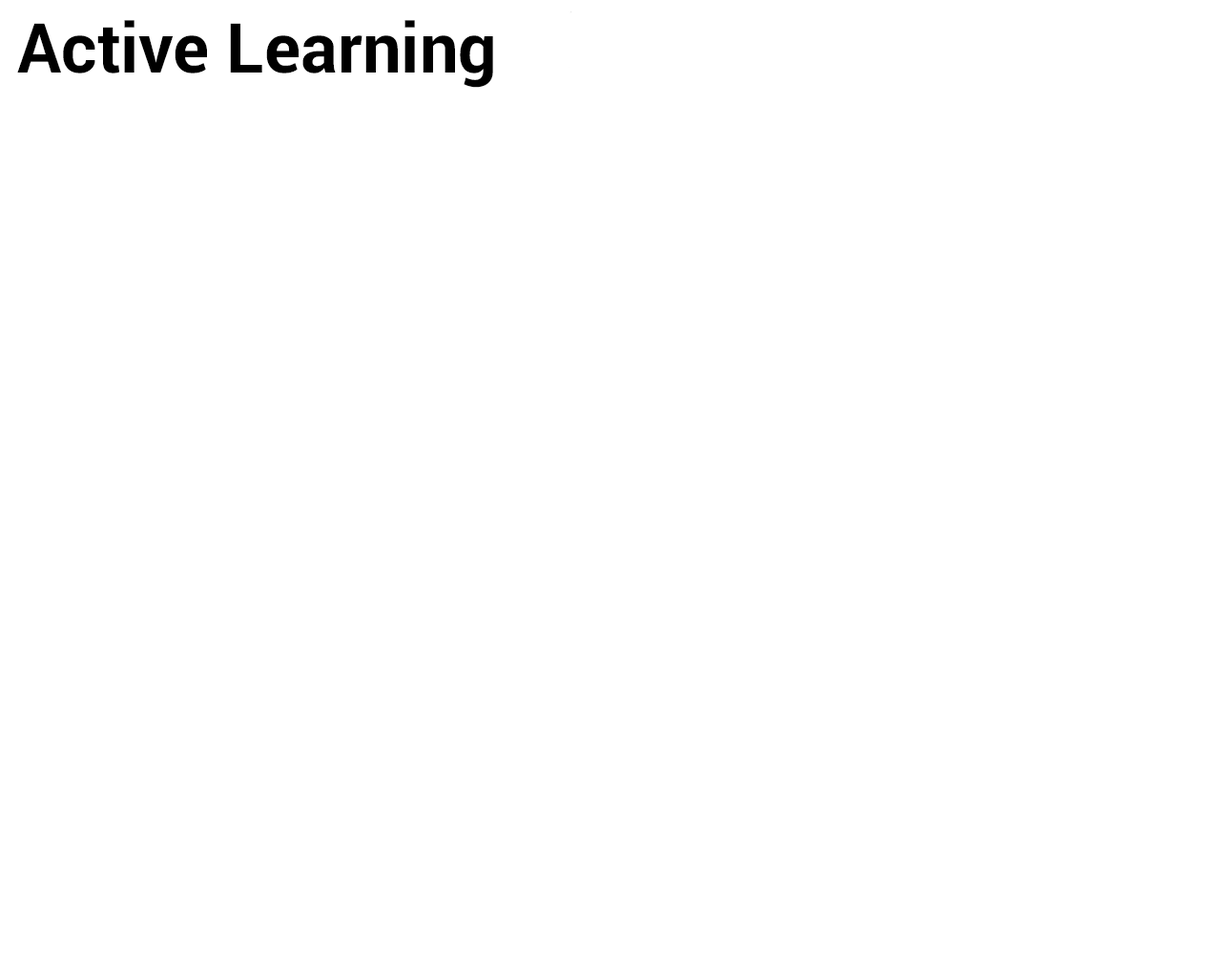
<style>
.page{position:relative;width:1221px;height:977px;background:#ffffff}
.page>*{position:absolute;margin:0}
.t1{font:68.7px "Roboto-Bold";color:#000000}
</style>
<div class="page">
<p class="t1" style="left:17px;top:20px;width:476px;height:68px">Active Learning</p>
</div>
